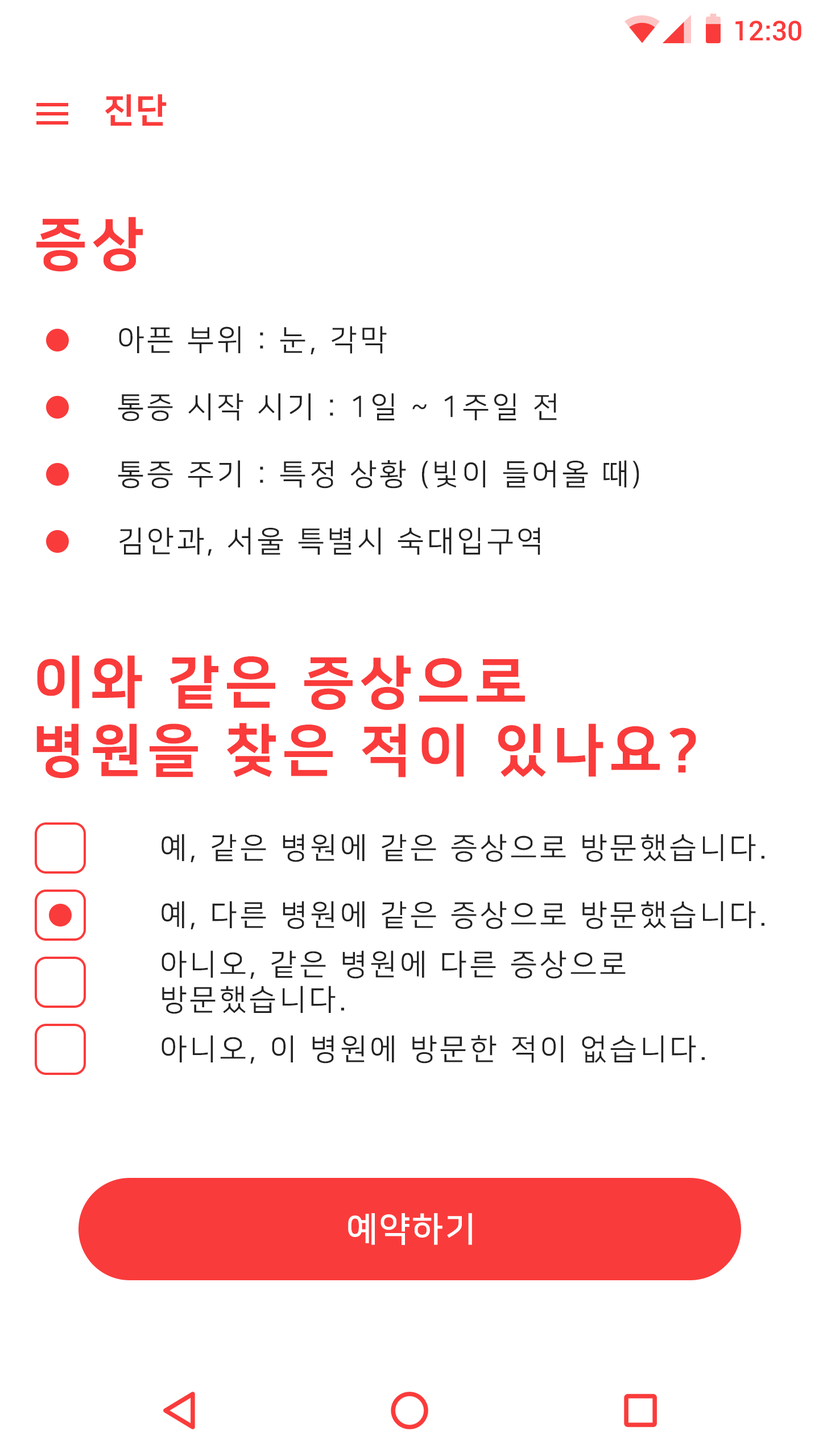
<style>
.page{position:relative;width:819px;height:1456px;background:#ffffff}
.page>*{position:absolute;margin:0}
.t1{font:27.3px "Roboto-Medium";color:#fa3b3b}
.t2{font:34.1px "NanumSquareEB";letter-spacing:0.05em;color:#fa3b3b}
.t3{font:56.9px "NanumSquareEB";letter-spacing:0.1em;color:#fa3b3b}
.t4{font:29.6px "NanumSquareR";letter-spacing:0.1em;color:#222222}
.t5{font:34.1px "NanumSquareB";letter-spacing:0.05em;color:#ffffff}
</style>
<div class="page">
<p class="t1" style="left:735px;top:20px;width:66px;height:21px">12:30</p>
<p class="t2" style="left:105px;top:94px;width:62px;height:32px">진단</p>
<p class="t3" style="left:36px;top:217px;width:107px;height:55px">증상</p>
<p class="t4" style="left:119px;top:326px;width:268px;height:28px">아픈 부위 : 눈, 각막</p>
<p class="t4" style="left:118px;top:393px;width:439px;height:28px">통증 시작 시기 : 1일 ~ 1주일 전</p>
<p class="t4" style="left:118px;top:460px;width:521px;height:29px">통증 주기 : 특정 상황 (빛이 들어올 때)</p>
<p class="t4" style="left:119px;top:527px;width:421px;height:29px">김안과, 서울 특별시 숙대입구역</p>
<p class="t3" style="left:36px;top:655px;width:660px;height:124px">이와 같은 증상으로<br>병원을 찾은 적이 있나요?</p>
<p class="t4" style="left:162px;top:834px;width:602px;height:28px">예, 같은 병원에 같은 증상으로 방문했습니다.</p>
<p class="t4" style="left:162px;top:901px;width:602px;height:28px">예, 다른 병원에 같은 증상으로 방문했습니다.</p>
<p class="t4" style="left:162px;top:950px;width:464px;height:64px">아니오, 같은 병원에 다른 증상으로<br>방문했습니다.</p>
<p class="t4" style="left:162px;top:1035px;width:543px;height:29px">아니오, 이 병원에 방문한 적이 없습니다.</p>
<p class="t5" style="left:348px;top:1213px;width:124px;height:32px">예약하기</p>
</div>
